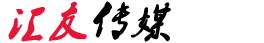
<style>
.page{position:relative;width:264px;height:43px;background:#ffffff}
.page>*{position:absolute;margin:0}
.t1{font:40px "2.0-";color:#e71534;font-weight:bold;font-style:italic}
.t2{font:40px "2.0-";color:#000000;font-weight:bold;font-style:italic}
</style>
<div class="page">
<p class="t1" style="left:8px;top:1px;width:163px;height:41px">汇友<span class="t2">传媒</span></p>
</div>
